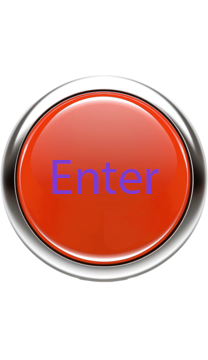
<style>
.page{position:relative;width:208px;height:360px;background:#ffffff}
.page>*{position:absolute;margin:0}
.t1{font:50px "MyriadPro-Regular";color:#7c3cd2}
</style>
<div class="page">
<p class="t1" style="left:52px;top:160px;width:107px;height:34px">Enter</p>
</div>
